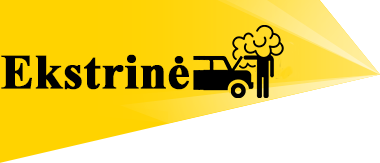
<style>
.page{position:relative;width:380px;height:163px;background:#ffffff}
.page>*{position:absolute;margin:0}
.t1{font:49px "TimesNewRomanPS-BoldMT";color:#000000;font-weight:bold}
</style>
<div class="page">
<p class="t1" style="left:1px;top:54px;width:188px;height:36px">Ekstrinė</p>
</div>
